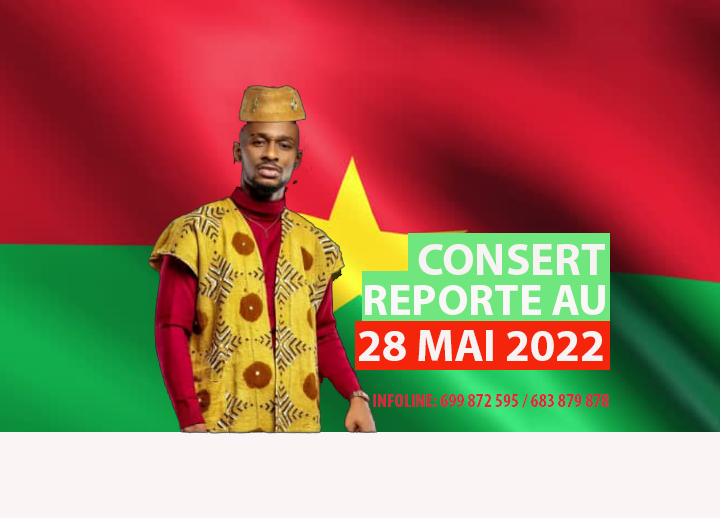
<style>
.page{position:relative;width:720px;height:518px}
.page>*{position:absolute;margin:0}
.t1{font:45px "MyriadPro-Bold";color:#f7f3f3}
.t2{font:44px "MyriadPro-Bold";color:#faf7f7}
.t3{font:19px "MyriadPro-BoldCond";color:#df2342}
</style>
<div class="page">
<p class="t1" style="left:418px;top:244px;width:187px;height:31px">CONSERT</p>
<p class="t2" style="left:365px;top:285px;width:240px;height:30px">REPORTE AU</p>
<p class="t1" style="left:359px;top:330px;width:244px;height:31px">28 MAI 2022</p>
<p class="t3" style="left:373px;top:394px;width:236px;height:14px">INFOLINE: 699 872 595 / 683 879 878</p>
</div>
